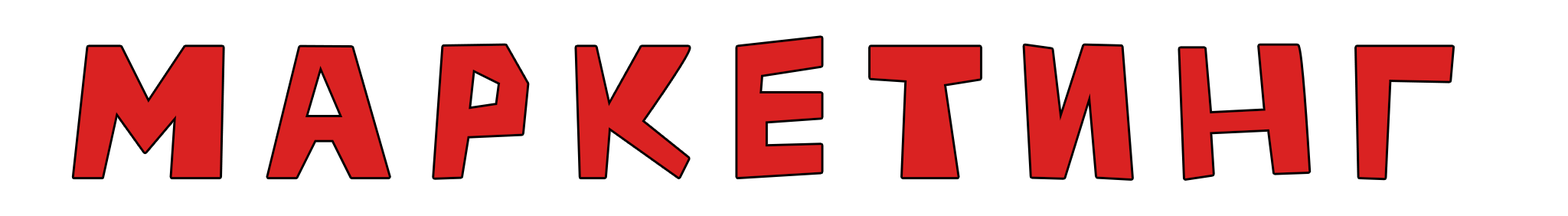
<style>
.page{position:relative;width:1568px;height:216px;background:#ffffff}
.page>*{position:absolute;margin:0}
.t1{font:189.7px "ZeroCool";letter-spacing:0.2em;color:#da2222}
</style>
<div class="page">
<p class="t1" style="left:74px;top:38px;width:1379px;height:140px">Маркетинг</p>
</div>
